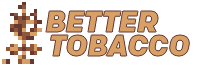
<style>
.page{position:relative;width:200px;height:65px;background:#ffffff}
.page>*{position:absolute;margin:0}
.t1{font:29.1px "Chrono-BlackItalic";color:#d9a066}
</style>
<div class="page">
<p class="t1" style="left:46px;top:11px;width:112px;height:21px">BETTER</p>
<p class="t1" style="left:50px;top:35px;width:140px;height:21px">TOBACCO</p>
</div>
